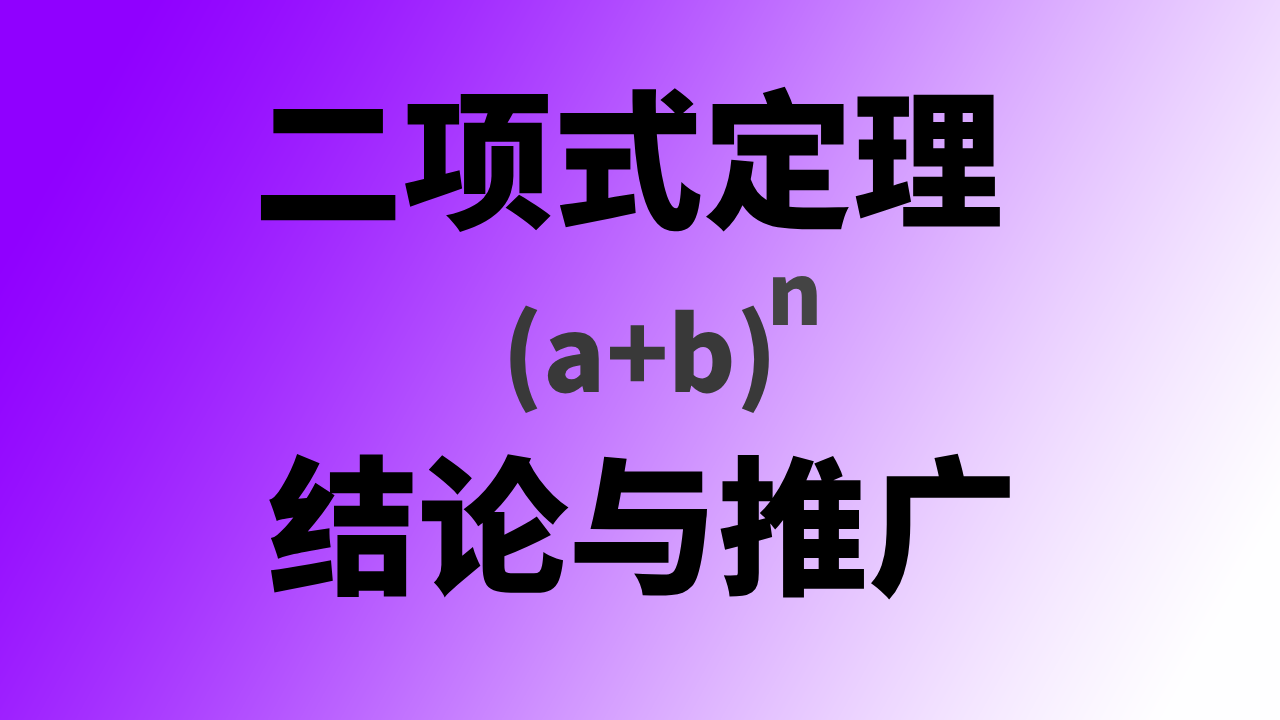
<style>
.page{position:relative;width:1280px;height:720px}
.page>*{position:absolute;margin:0}
.t1{font:150px "SourceHanSansSC-Heavy";color:#000000}
.t2{font:84px "SourceHanSansSC-Heavy";color:#444444}
.t3{font:103px "SourceHanSansSC-Heavy";color:#393939}
</style>
<div class="page">
<p class="t1" style="left:260px;top:86px;width:740px;height:146px">二项式定理</p>
<p class="t2" style="left:773px;top:276px;width:44px;height:49px">n</p>
<p class="t3" style="left:510px;top:305px;width:259px;height:109px">(a+b)</p>
<p class="t1" style="left:269px;top:453px;width:741px;height:147px">结论与推广</p>
</div>
